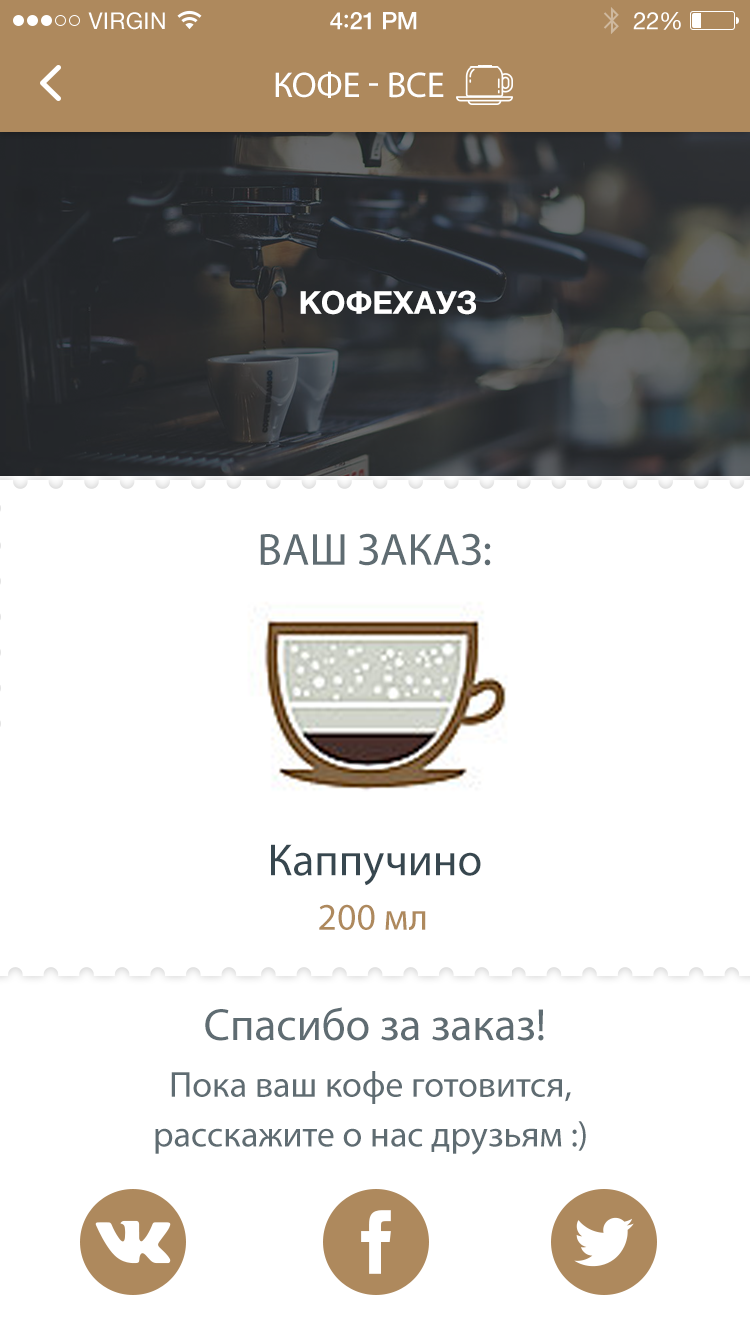
<style>
.page{position:relative;width:750px;height:1334px;background:#ffffff}
.page>*{position:absolute;margin:0}
.t1{font:23px "HelveticaNeue";letter-spacing:0.02em;color:#ffffff}
.t2{font:24px "HelveticaNeue-Medium";letter-spacing:-0.02em;color:#ffffff}
.t3{font:26px "Avenir-Medium";letter-spacing:-0.02em;color:#ffffff}
.t4{font:24px "HelveticaNeue";letter-spacing:-0.02em;color:#ffffff}
.t5{font:36px "MyriadPro-Regular";color:#ffffff;text-transform:uppercase}
.t6{font:31.7px "HelveticaNeueCyr-Bold";color:#ffffff}
.t7{font:45.3px "MyriadPro-Regular";color:#5f6c72}
.t8{font:45.3px "MyriadPro-Regular";color:#37474f}
.t9{font:38px "MyriadPro-Regular";color:#ae895d}
.t10{font:36.2px/49.8px "MyriadPro-Regular";color:#5f6c72}
</style>
<div class="page">
<p class="t1" style="left:88px;top:12px;width:77px;height:18px">VIRGIN</p>
<p class="t2" style="left:330px;top:12px;width:87px;height:18px">4<span class="t3">:</span>21 PM</p>
<p class="t4" style="left:633px;top:12px;width:48px;height:18px">22%</p>
<p class="t5" style="left:275px;top:71px;width:169px;height:27px">кофе - все</p>
<p class="t6" style="left:300px;top:290px;width:176px;height:25px">КОФЕХАУЗ</p>
<p class="t7" style="left:260px;top:533px;width:231px;height:33px">ВАШ ЗАКАЗ:</p>
<p class="t8" style="left:271px;top:844px;width:210px;height:42px">Каппучино</p>
<p class="t9" style="left:319px;top:904px;width:107px;height:26px">200 мл</p>
<p class="t7" style="left:205px;top:1007px;width:339px;height:34px">Спасибо за заказ!</p>
<p class="t10" style="left:155px;top:1071px;width:431px;height:84px;text-align:center">Пока ваш кофе готовится, <br>расскажите о нас друзьям :)</p>
</div>
